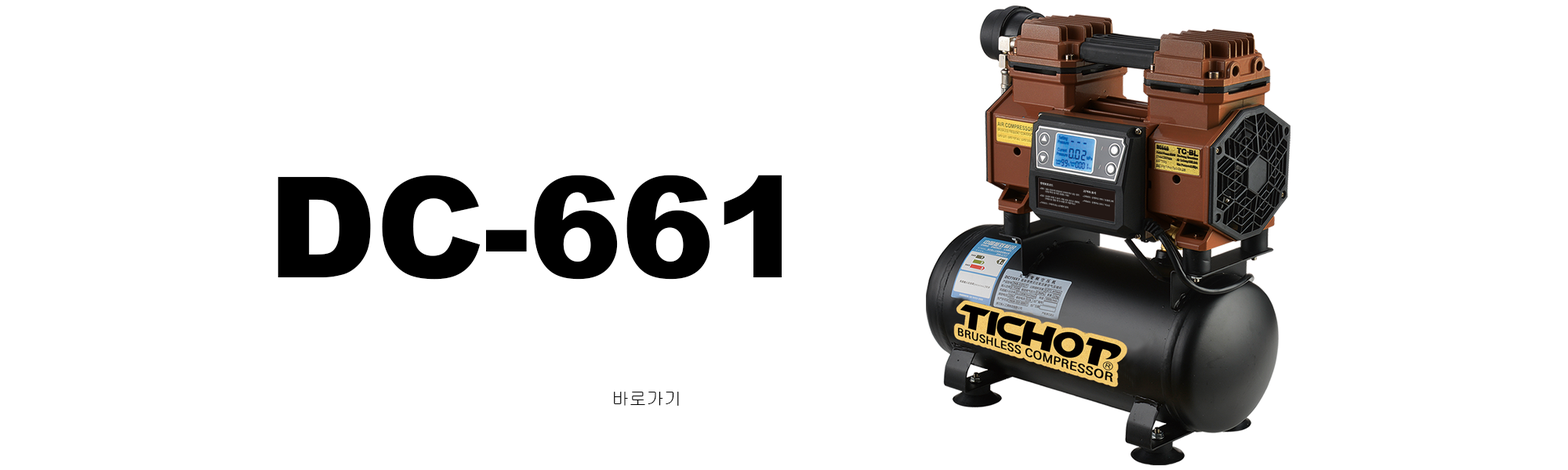
<style>
.page{position:relative;width:1568px;height:470px;background:#ffffff}
.page>*{position:absolute;margin:0}
.t1{font:140.7px "Arial-Black";letter-spacing:-0.01em;color:#000000}
.t2{font:17.7px "Gulim";letter-spacing:-0.01em;color:#000000}
</style>
<div class="page">
<p class="t1" style="left:278px;top:175px;width:504px;height:105px">DC-661</p>
<p class="t2" style="left:614px;top:392px;width:65px;height:14px">바로가기</p>
</div>
